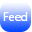
<style>
.page{position:relative;width:32px;height:32px}
.page>*{position:absolute;margin:0}
.t1{font:12px "MyriadHebrew-Regular";color:#ffffff}
</style>
<div class="page">
<p class="t1" style="left:3px;top:12px;width:25px;height:9px">Feed</p>
</div>
